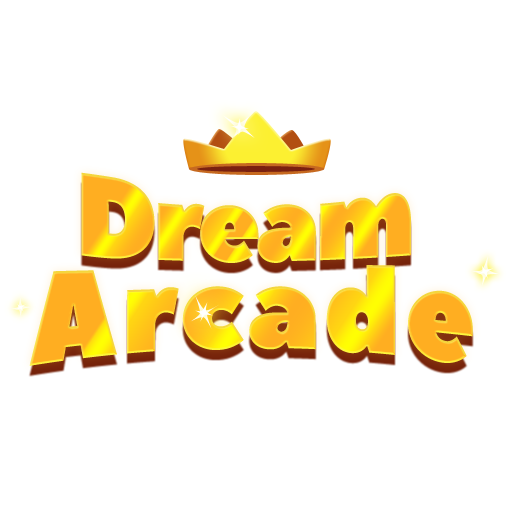
<style>
.page{position:relative;width:512px;height:512px;background:#ffffff}
.page>*{position:absolute;margin:0}
.t1{font:119.8px "PeaceSans";letter-spacing:-0.05em;scale:0.87 1}
.t2{font:134.2px "PeaceSans";letter-spacing:0.025em;scale:0.87 1}
</style>
<div class="page">
<p class="t1" style="left:81px;top:172px;width:330px;height:91px">Dream</p>
<p class="t2" style="left:29px;top:265px;width:444px;height:101px">Arcade</p>
</div>
